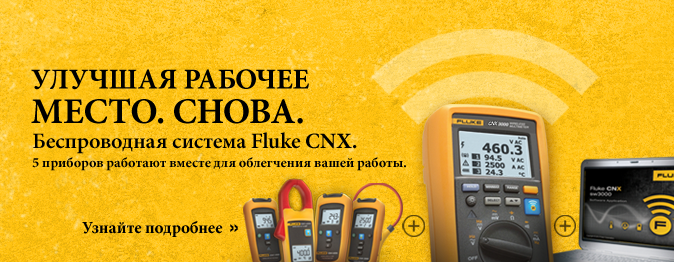
<style>
.page{position:relative;width:674px;height:262px}
.page>*{position:absolute;margin:0}
.t1{font:29px "MinionPro-Bold";letter-spacing:-0.005em;color:#000000;text-transform:uppercase}
.t2{font:36px "MinionPro-Bold";letter-spacing:-0.005em;color:#000000;text-transform:uppercase}
.t3{font:14px/18.8px "MinionPro-Bold";letter-spacing:-0.01em;color:#000000}
.t4{font:22px/18.8px "MinionPro-Semibold";letter-spacing:-0.01em;color:#000000}
.t5{font:22px/18.8px "MinionPro-Bold";letter-spacing:-0.01em;color:#000000}
.t6{font:17px "MinionPro-Bold";letter-spacing:-0.01em;color:#000000}
.t7{font:17px "HelveticaNeueLTStd-BdEx";letter-spacing:-0.01em;color:#000000}
</style>
<div class="page">
<p class="t1" style="left:31px;top:69px;width:278px;height:21px">Улучшая рабочее</p>
<p class="t2" style="left:31px;top:98px;width:272px;height:26px">место. Снова.</p>
<p class="t3" style="left:32px;top:132px;width:374px;height:39px"><span class="t4">Беспроводная система Fluke </span><span class="t5">CNX.<br></span>5 приборов работают вместе для облегчения вашей работы.</p>
<p class="t6" style="left:82px;top:221px;width:156px;height:16px">Узнайте подробнее<span class="t7"> »</span></p>
</div>
